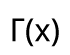
<style>
.page{position:relative;width:70px;height:55px;background:#ffffff}
.page>*{position:absolute;margin:0}
.t1{font:31.8px "DroidSans";color:#000000}
</style>
<div class="page">
<p class="t1" style="left:12px;top:18px;width:47px;height:29px">Г(x)</p>
</div>
